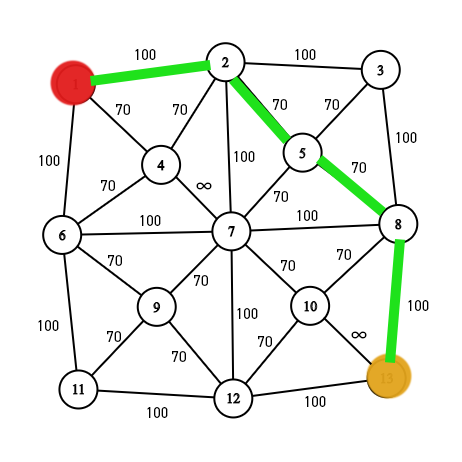
<style>
.page{position:relative;width:462px;height:462px;background:#ffffff}
.page>*{position:absolute;margin:0}
.t1{font:15px "DIN2014-Regular";color:#000000}
.t2{font:21px "DIN2014-Regular";color:#000000}
</style>
<div class="page">
<p class="t1" style="left:135px;top:49px;width:21px;height:11px">100</p>
<p class="t1" style="left:295px;top:49px;width:21px;height:11px">100</p>
<p class="t1" style="left:273px;top:99px;width:14px;height:11px">70</p>
<p class="t1" style="left:325px;top:99px;width:14px;height:11px">70</p>
<p class="t1" style="left:116px;top:104px;width:14px;height:11px">70</p>
<p class="t1" style="left:173px;top:104px;width:14px;height:11px">70</p>
<p class="t1" style="left:396px;top:132px;width:21px;height:11px">100</p>
<p class="t1" style="left:39px;top:155px;width:21px;height:11px">100</p>
<p class="t1" style="left:234px;top:151px;width:21px;height:11px">100</p>
<p class="t1" style="left:352px;top:162px;width:14px;height:11px">70</p>
<p class="t1" style="left:101px;top:180px;width:14px;height:11px">70</p>
<p class="t2" style="left:196px;top:182px;width:16px;height:8px">∞</p>
<p class="t1" style="left:274px;top:191px;width:14px;height:11px">70</p>
<p class="t1" style="left:140px;top:215px;width:21px;height:11px">100</p>
<p class="t1" style="left:297px;top:210px;width:21px;height:11px">100</p>
<p class="t1" style="left:108px;top:255px;width:14px;height:11px">70</p>
<p class="t1" style="left:337px;top:249px;width:14px;height:11px">70</p>
<p class="t1" style="left:281px;top:260px;width:14px;height:11px">70</p>
<p class="t1" style="left:194px;top:275px;width:14px;height:11px">70</p>
<p class="t1" style="left:408px;top:300px;width:21px;height:11px">100</p>
<p class="t1" style="left:237px;top:308px;width:21px;height:11px">100</p>
<p class="t1" style="left:38px;top:320px;width:21px;height:11px">100</p>
<p class="t1" style="left:107px;top:331px;width:14px;height:11px">70</p>
<p class="t1" style="left:258px;top:336px;width:14px;height:11px">70</p>
<p class="t2" style="left:351px;top:331px;width:16px;height:8px">∞</p>
<p class="t1" style="left:172px;top:351px;width:14px;height:11px">70</p>
<p class="t1" style="left:305px;top:396px;width:21px;height:11px">100</p>
<p class="t1" style="left:147px;top:407px;width:21px;height:11px">100</p>
</div>
